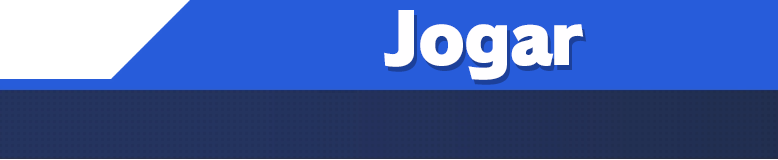
<style>
.page{position:relative;width:778px;height:160px;background:#275cda}
.page>*{position:absolute;margin:0}
.t1{font:70.7px "RodinPro-UB";letter-spacing:-0.035em;color:#fffeff}
</style>
<div class="page">
<p class="t1" style="left:384px;top:10px;width:200px;height:70px">Jogar</p>
</div>
